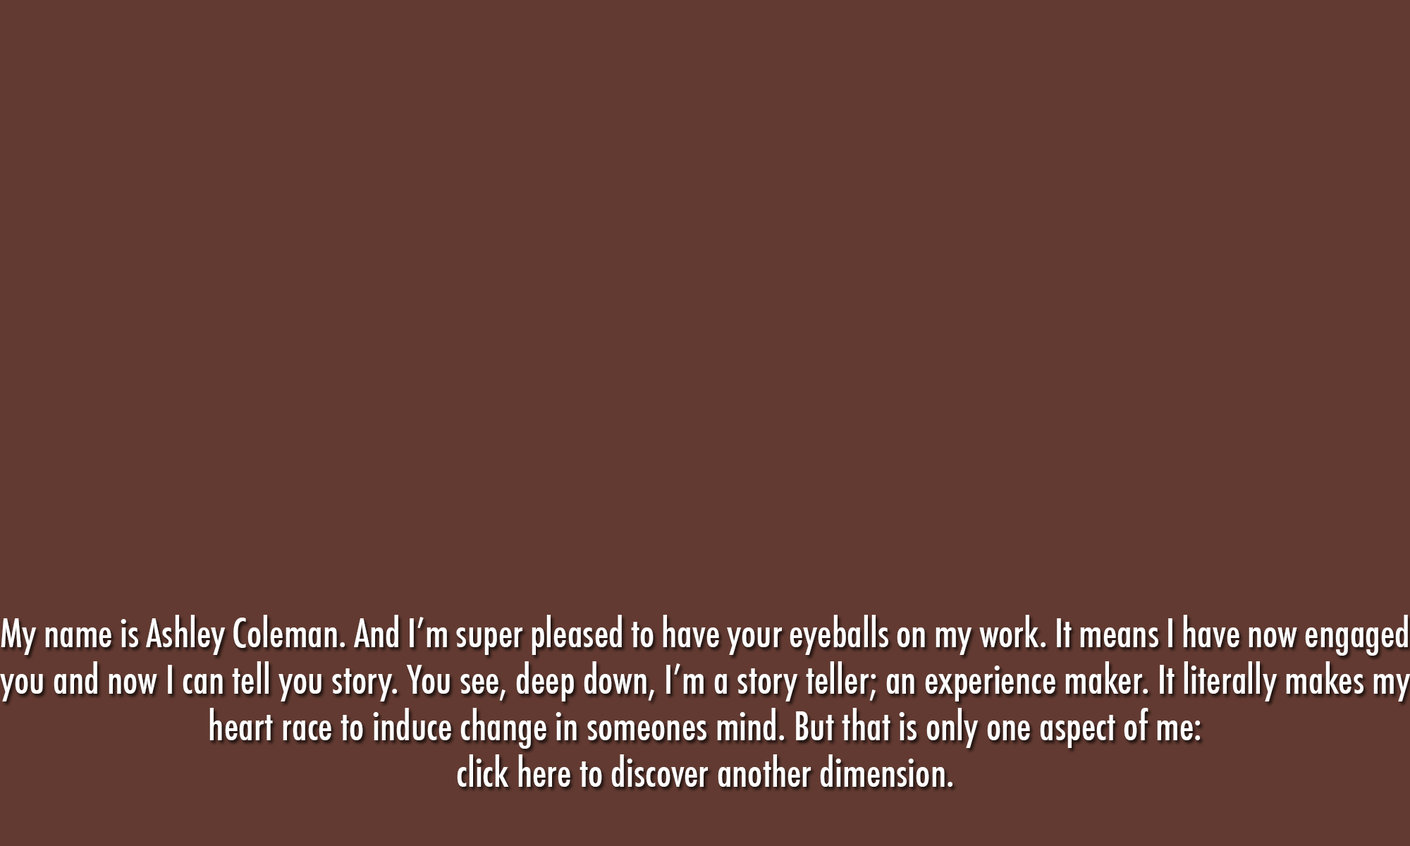
<style>
.page{position:relative;width:1410px;height:846px;background:#623a31}
.page>*{position:absolute;margin:0}
.t1{font:38.8px "Futura-CondensedMedium";color:#ffffff}
</style>
<div class="page">
<p class="t1" style="left:0px;top:615px;width:1410px;height:172px;text-align:justify">My name is Ashley Coleman. And I’m super pleased to have your eyeballs on my work. It means I have now engaged you and now I can tell you story. You see, deep down, I’m a story teller; an experience maker. It literally makes my heart race to induce change in someones mind. But that is only one aspect of me:<br>click here to discover another dimension.</p>
</div>
